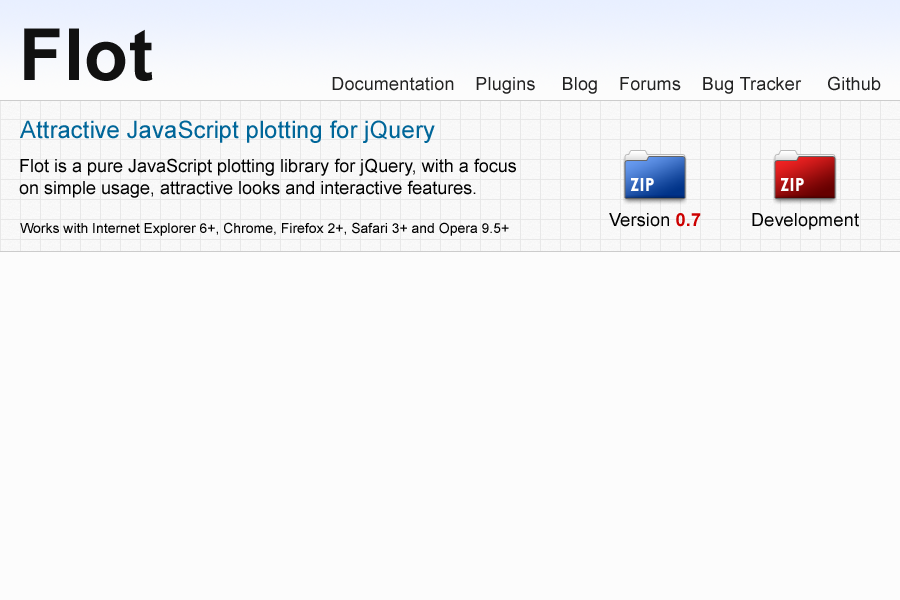
<style>
.page{position:relative;width:900px;height:600px;background:#fcfcfc}
.page>*{position:absolute;margin:0}
.t1{font:72px "Arial-BoldMT";letter-spacing:0.01em;color:#111111}
.t2{font:18px "ArialMT";letter-spacing:0.01em;color:#222222}
.t3{font:24px "ArialMT";color:#006699}
.t4{font:18px "ArialMT";color:#000000}
.t5{font:14px "ArialMT";color:#000000}
.t6{font:18px "ArialMT";letter-spacing:0.01em;color:#000000}
.t7{font:18px "Arial-BoldMT";letter-spacing:0.01em;color:#cc0000}
</style>
<div class="page">
<p class="t1" style="left:24px;top:28px;width:129px;height:53px">Flot</p>
<p class="t2" style="left:332px;top:76px;width:549px;height:18px">Documentation    Plugins     Blog    Forums    Bug Tracker     Github</p>
<p class="t3" style="left:20px;top:120px;width:415px;height:23px">Attractive JavaScript plotting for jQuery</p>
<p class="t4" style="left:19px;top:158px;width:497px;height:40px">Flot is a pure JavaScript plotting library for jQuery, with a focus<br>on simple usage, attractive looks and interactive features.</p>
<p class="t5" style="left:20px;top:222px;width:489px;height:14px">Works with Internet Explorer 6+, Chrome, Firefox 2+, Safari 3+ and Opera 9.5+</p>
<p class="t6" style="left:609px;top:213px;width:92px;height:14px">Version <span class="t7">0.7</span></p>
<p class="t6" style="left:752px;top:213px;width:107px;height:17px">Development</p>
</div>
